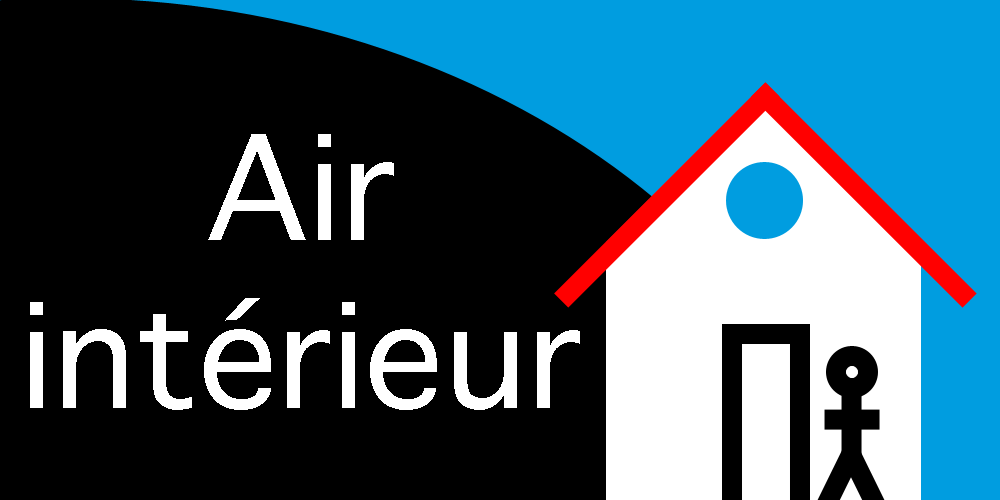
<style>
.page{position:relative;width:1000px;height:500px;background:#000000}
.page>*{position:absolute;margin:0}
.t1{font:140px "Sathu";color:#ffffff}
</style>
<div class="page">
<p class="t1" style="left:30px;top:134px;width:550px;height:276px;text-align:center">Air<br>intérieur</p>
</div>
